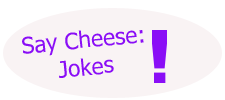
<style>
.page{position:relative;width:225px;height:100px;background:#f9f3f4}
.page>*{position:absolute;margin:0}
.t1{font:22.9px "Tahoma";color:#8a0ef6}
</style>
<div class="page">
<p class="t1" style="left:22px;top:30px;width:122px;height:48px;text-align:center;rotate:-6deg">Say Cheese:<br>Jokes</p>
</div>
